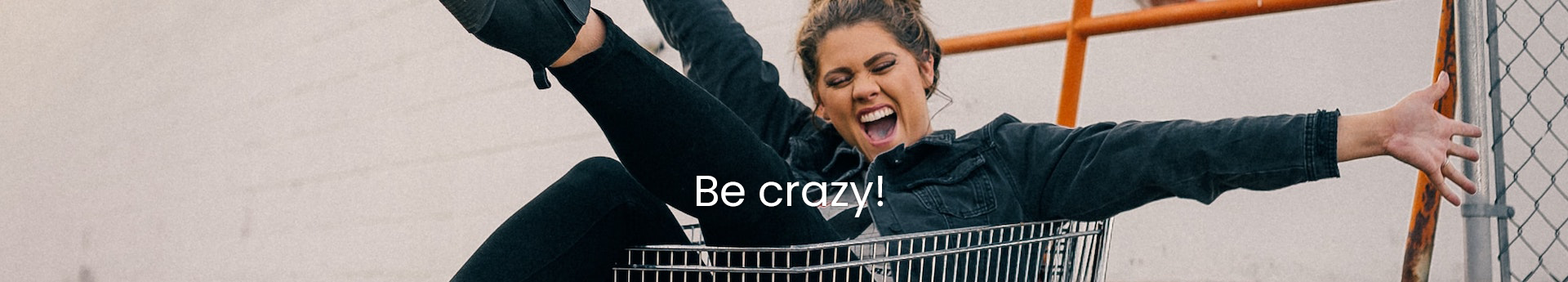
<style>
.page{position:relative;width:1568px;height:282px}
.page>*{position:absolute;margin:0}
.t1{font:43.3px "Poppins-Regular";color:#ffffff}
</style>
<div class="page">
<p class="t1" style="left:697px;top:176px;width:187px;height:41px">Be crazy!</p>
</div>
